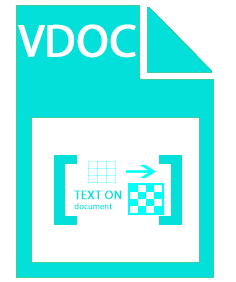
<style>
.page{position:relative;width:236px;height:282px;background:#ffffff}
.page>*{position:absolute;margin:0}
.t1{font:45.8px "MyriadPro-Regular";color:#ffffff;font-weight:bold}
.t2{font:8.3px "MyriadPro-Regular";color:#02e0d9;font-weight:bold}
.t3{font:12.5px "MyriadPro-Regular";color:#02e0d9;font-weight:bold}
</style>
<div class="page">
<p class="t1" style="left:18px;top:24px;width:118px;height:34px">VDOC</p>
<p class="t2" style="left:74px;top:190px;width:48px;height:20px"><span class="t3">TEXT ON <br></span>document</p>
</div>
